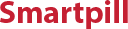
<style>
.page{position:relative;width:128px;height:29px;background:#ffffff}
.page>*{position:absolute;margin:0}
.t1{font:32px "MyriadPro-Bold";color:#c52033}
</style>
<div class="page">
<p class="t1" style="left:0px;top:0px;width:128px;height:29px">Smartpill</p>
</div>
